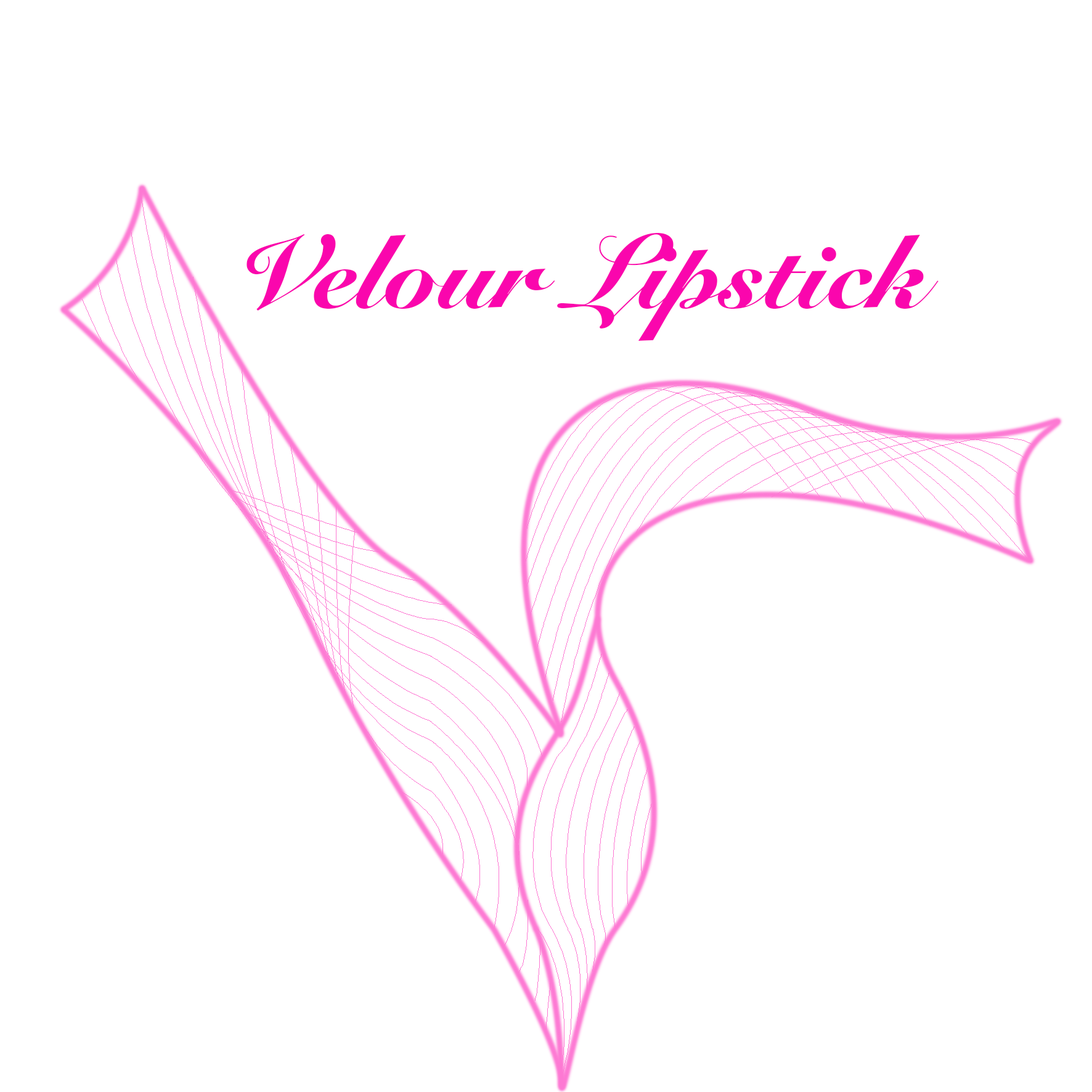
<style>
.page{position:relative;width:1092px;height:1092px;background:#ffffff}
.page>*{position:absolute;margin:0}
.t1{font:102.7px "SnellRoundhand-Black";color:#fa06ad}
</style>
<div class="page">
<p class="t1" style="left:246px;top:233px;width:693px;height:108px">Velour Lipstick</p>
</div>
